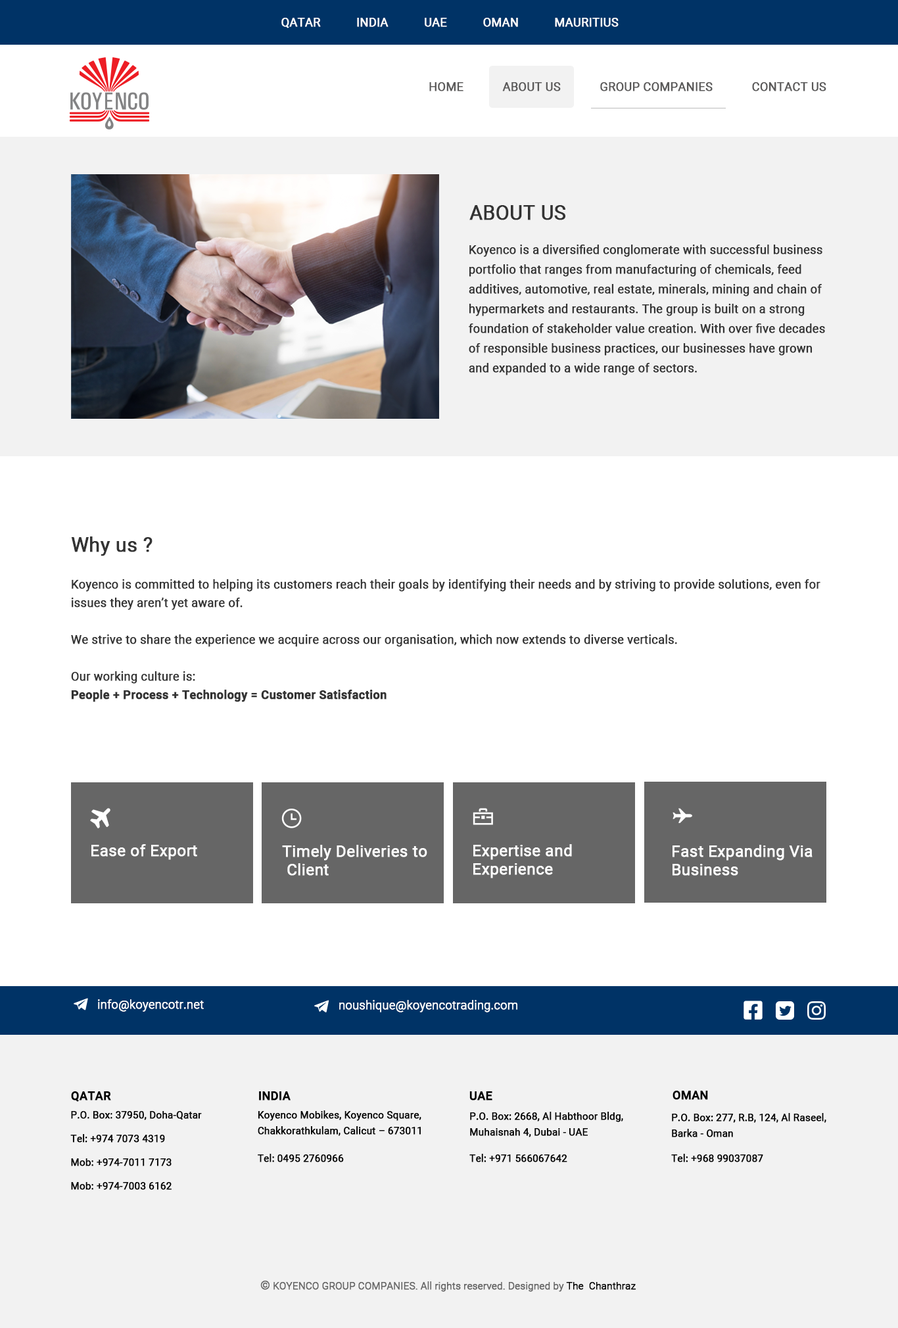
<style>
.page{position:relative;width:898px;height:1328px;background:#ffffff}
.page>*{position:absolute;margin:0}
.t1{font:11.8px "Roboto-Regular";color:#ffffff;font-weight:bold}
.t2{font:11.8px "Roboto-Regular";color:#5a5959;font-weight:bold}
.t3{font:19.7px "Roboto-Regular";color:#333333;font-weight:bold}
.t4{font:11.8px/19.7px "Roboto-Regular";color:#333333;font-weight:bold}
.t5{font:11.8px/18.4px "Roboto-Regular";color:#333333;font-weight:bold}
.t6{font:19.7px/18.4px "Roboto-Regular";color:#333333;font-weight:bold}
.t7{font:11.8px/18.4px "Roboto-Bold";color:#333333;font-weight:bold}
.t8{font:15.8px "Roboto-Regular";color:#ffffff;font-weight:bold}
.t9{font:15.8px/18.4px "Roboto-Regular";color:#ffffff;font-weight:bold}
.t10{font:11.8px "Roboto-Light";color:#ffffff;font-weight:bold}
.t11{font:11.8px "Roboto-Medium";color:#000000;font-weight:bold}
.t12{font:9.9px/11.8px "Roboto-Regular";color:#000000;font-weight:bold}
.t13{font:9.9px/15.8px "Roboto-Regular";color:#000000;font-weight:bold}
.t14{font:9.9px/23.7px "Roboto-Regular";color:#000000;font-weight:bold}
.t15{font:9.9px/27.6px "Roboto-Regular";color:#000000;font-weight:bold}
.t16{font:9.9px/10.5px "Roboto-Regular";color:#000000;font-weight:bold}
.t17{font:9.9px/9.2px "Roboto-Regular";color:#000000;font-weight:bold}
.t18{font:9.9px "Roboto-Light";color:#666666;font-weight:bold}
.t19{font:11.8px "Roboto-Light";color:#666666;font-weight:bold}
.t20{font:9.9px "Roboto-Light";color:#000000;font-weight:bold}
</style>
<div class="page">
<p class="t1" style="left:281px;top:18px;width:338px;height:10px">QATAR           INDIA           UAE           OMAN           MAURITIUS</p>
<p class="t2" style="left:429px;top:82px;width:397px;height:9px">HOME            ABOUT US            GROUP COMPANIES            CONTACT US</p>
<p class="t3" style="left:469px;top:205px;width:96px;height:15px">ABOUT US</p>
<p class="t4" style="left:469px;top:245px;width:356px;height:130px">Koyenco is a diversiﬁed conglomerate with successful business portfolio that ranges from manufacturing of chemicals, feed <br>additives, automotive, real estate, minerals, mining and chain of hypermarkets and restaurants. The group is built on a strong foundation of stakeholder value creation. With over ﬁve decades of responsible business practices, our businesses have grown and expanded to a wide range of sectors.</p>
<p class="t5" style="left:71px;top:536px;width:749px;height:166px"><span class="t6">Why us ?<br></span><br>Koyenco is committed to helping its customers reach their goals by identifying their needs and by striving to provide solutions, even for issues they aren’t yet aware of.<br><br>We strive to share the experience we acquire across our organisation, which now extends to diverse verticals.<br><br>Our working culture is:<br><span class="t7">People + Process + Technology = Customer Satisfaction</span></p>
<p class="t8" style="left:91px;top:844px;width:106px;height:16px">Ease of Export</p>
<p class="t9" style="left:282px;top:845px;width:145px;height:31px">Timely Deliveries to<br> Client</p>
<p class="t9" style="left:473px;top:844px;width:99px;height:34px">Expertise and<br>Experience</p>
<p class="t9" style="left:672px;top:845px;width:141px;height:31px">Fast Expanding Via Business</p>
<p class="t10" style="left:98px;top:999px;width:106px;height:13px">info@koyencotr.net</p>
<p class="t10" style="left:339px;top:1000px;width:178px;height:12px">noushique@koyencotrading.com</p>
<p class="t11" style="left:71px;top:1091px;width:40px;height:11px">QATAR</p>
<p class="t11" style="left:259px;top:1091px;width:32px;height:9px">INDIA</p>
<p class="t11" style="left:469px;top:1091px;width:23px;height:9px">UAE</p>
<p class="t11" style="left:672px;top:1091px;width:36px;height:9px">OMAN</p>
<p class="t12" style="left:70px;top:1111px;width:132px;height:79px">P.O. Box: 37950, Doha-Qatar<br><br>Tel: +974 7073 4319<br><br>Mob: +974-7011 7173<br><br>Mob: +974-7003 6162</p>
<p class="t13" style="left:258px;top:1110px;width:163px;height:52px"><span class="t14"><br><br></span>Koyenco Mobikes, Koyenco Square, <br>Chakkorathkulam, Calicut – 673011<br><span class="t15">Tel: 0495 2760966</span></p>
<p class="t13" style="left:469px;top:1112px;width:154px;height:50px">P.O. Box: 2668, Al Habthoor Bldg, Muhaisnah 4, Dubai - UAE<br><br><span class="t16">Tel: +971 566067642</span></p>
<p class="t13" style="left:671px;top:1113px;width:155px;height:49px">P.O. Box: 277, R.B, 124, Al Raseel, Barka - Oman<br><br><span class="t17">Tel: +968 99037087</span></p>
<p class="t18" style="left:260px;top:1281px;width:376px;height:11px"><span class="t19">©</span> KOYENCO GROUP COMPANIES. All rights reserved. Designed by<span class="t20"> The  Chanthraz</span></p>
</div>
